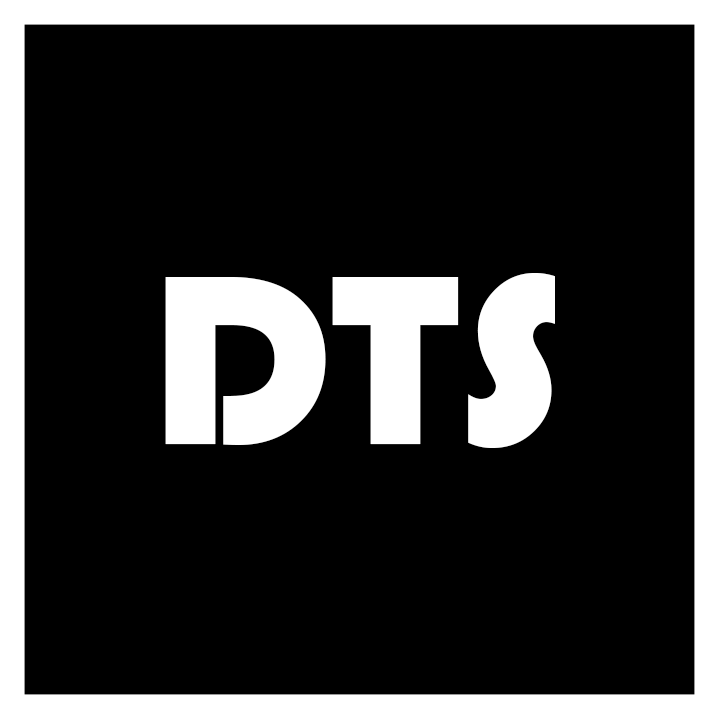
<style>
.page{position:relative;width:720px;height:720px;background:#000000}
.page>*{position:absolute;margin:0}
.t1{font:250px "Bauhaus93";color:#ffffff}
</style>
<div class="page">
<p class="t1" style="left:165px;top:273px;width:390px;height:175px">DTS</p>
</div>
